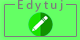
<style>
.page{position:relative;width:80px;height:40px;background:#64ff64}
.page>*{position:absolute;margin:0}
.t1{font:12.5px "MyriadPro-Regular";letter-spacing:0.2em;color:#7c7c7c}
</style>
<div class="page">
<p class="t1" style="left:18px;top:0px;width:45px;height:12px">Edytuj</p>
</div>
